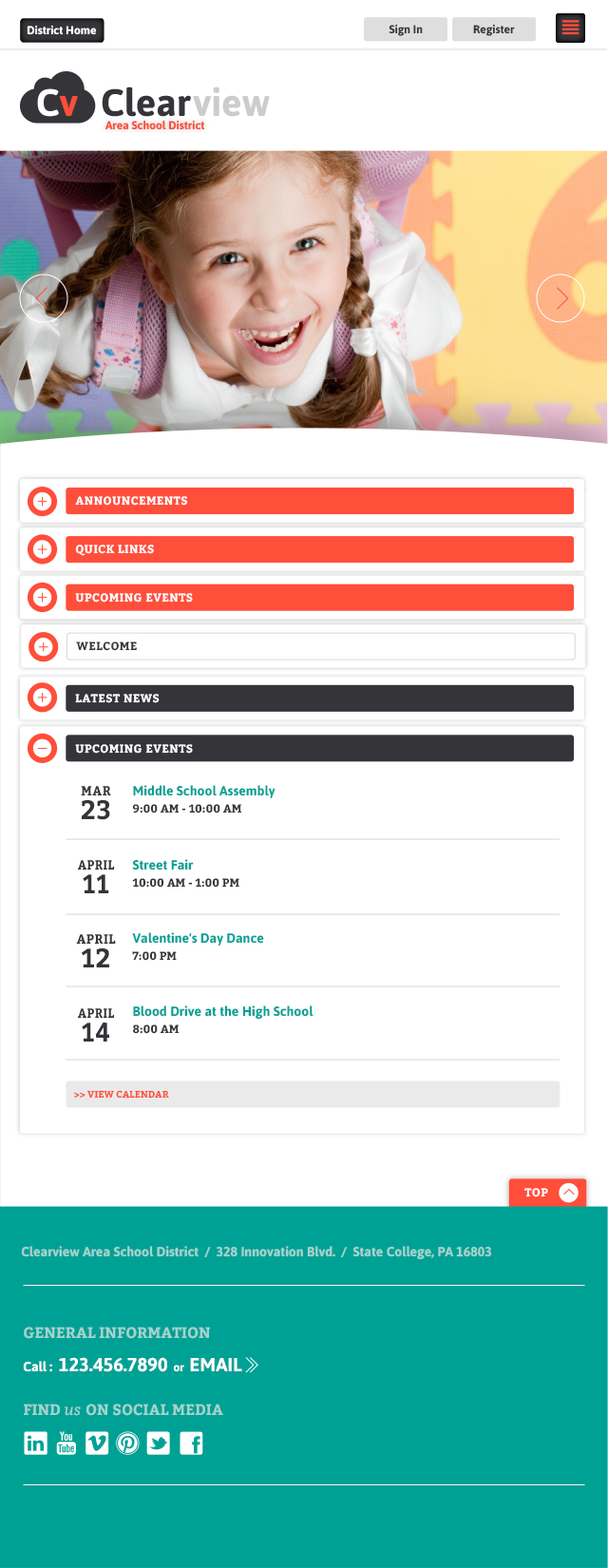
<style>
.page{position:relative;width:608px;height:1568px;background:#ffffff}
.page>*{position:absolute;margin:0}
.t1{font:11.4px "Asap-Bold";color:#ffffff}
.t2{font:11.4px "Asap-Bold";color:#353539}
.t3{font:11.4px "Asap-Bold";color:#ff4e3a}
.t4{font:11.4px "Bitter-Bold";letter-spacing:0.036em;color:#ffffff;text-transform:uppercase}
.t5{font:11.4px "Bitter-Bold";letter-spacing:0.036em;color:#353539;text-transform:uppercase}
.t6{font:13.3px/17.1px "Bitter-Bold";letter-spacing:0.036em;color:#353539;text-transform:uppercase;scale:0.93 1}
.t7{font:26.6px/23.8px "Bitter-Bold";letter-spacing:0.036em;color:#353539;text-transform:uppercase;scale:0.93 1}
.t8{font:13.3px/17.1px "Asap-Bold";color:#00a195}
.t9{font:11.4px/17.1px "Bitter-Bold";color:#353539;text-transform:uppercase}
.t10{font:13.3px/17.1px "Bitter-Bold";letter-spacing:0.036em;color:#353539;text-transform:uppercase;scale:0.88 1}
.t11{font:26.6px/23.8px "Bitter-Bold";letter-spacing:0.036em;color:#353539;text-transform:uppercase;scale:0.88 1}
.t12{font:9.5px "Bitter-Bold";color:#ff4e3a}
.t13{font:13.3px "Asap-Bold";color:#a3d3ce}
.t14{font:15.2px "Bitter-Bold";color:#a3d3ce}
.t15{font:19px "Asap-Bold";color:#ffffff}
.t16{font:13.3px "Asap-Bold";color:#ffffff}
.t17{font:15.2px "Bitter-Italic";color:#a3d3ce}
</style>
<div class="page">
<p class="t1" style="left:27px;top:25px;width:70px;height:10px">District Home</p>
<p class="t2" style="left:389px;top:24px;width:34px;height:12px">Sign In</p>
<p class="t2" style="left:473px;top:24px;width:42px;height:12px">Register</p>
<p class="t3" style="left:105px;top:120px;width:100px;height:10px">Area School District</p>
<p class="t4" style="left:75px;top:496px;width:112px;height:10px">Announcements</p>
<p class="t4" style="left:75px;top:545px;width:79px;height:11px">QUICK LINKS</p>
<p class="t4" style="left:75px;top:593px;width:118px;height:9px">UPCOMING EVENTS</p>
<p class="t5" style="left:76px;top:641px;width:61px;height:10px">WELCOME</p>
<p class="t4" style="left:75px;top:694px;width:85px;height:9px">LATEST NEWS</p>
<p class="t4" style="left:75px;top:744px;width:118px;height:10px">UPCOMING EVENTS</p>
<p class="t6" style="left:81px;top:786px;width:30px;height:34px;text-align:center">mar<br><span class="t7">23</span></p>
<p class="t8" style="left:132px;top:785px;width:144px;height:28px">Middle School Assembly<br><span class="t9">9:00 AM - 10:00 AM</span></p>
<p class="t10" style="left:77px;top:860px;width:38px;height:33px;text-align:center">APRIL<br><span class="t11">11</span></p>
<p class="t9" style="left:132px;top:859px;width:107px;height:29px"><span class="t8">Street Fair<br></span>10:00 AM - 1:00 PM</p>
<p class="t6" style="left:76px;top:934px;width:40px;height:33px;text-align:center">APRIL<br><span class="t7">12</span></p>
<p class="t8" style="left:132px;top:932px;width:132px;height:29px">Valentine's Day Dance<br><span class="t9">7:00 PM</span></p>
<p class="t10" style="left:77px;top:1008px;width:38px;height:34px;text-align:center">APRIL<br><span class="t11">14</span></p>
<p class="t8" style="left:133px;top:1005px;width:181px;height:29px">Blood Drive at the High School<br><span class="t9">8:00 AM</span></p>
<p class="t12" style="left:74px;top:1090px;width:95px;height:9px">&gt;&gt; VIEW CALENDAR</p>
<p class="t4" style="left:525px;top:1188px;width:23px;height:9px">TOP</p>
<p class="t13" style="left:21px;top:1246px;width:471px;height:14px">Clearview Area School District  /  328 Innovation Blvd.  /  State College, PA 16803</p>
<p class="t14" style="left:24px;top:1327px;width:186px;height:12px">GENERAL INFORMATION</p>
<p class="t15" style="left:23px;top:1357px;width:219px;height:15px"><span class="t16">Call :  </span>123.456.7890  <span class="t1">or  </span>EMAIL</p>
<p class="t14" style="left:24px;top:1404px;width:199px;height:12px">FIND <span class="t17">us </span>ON SOCIAL MEDIA</p>
</div>
